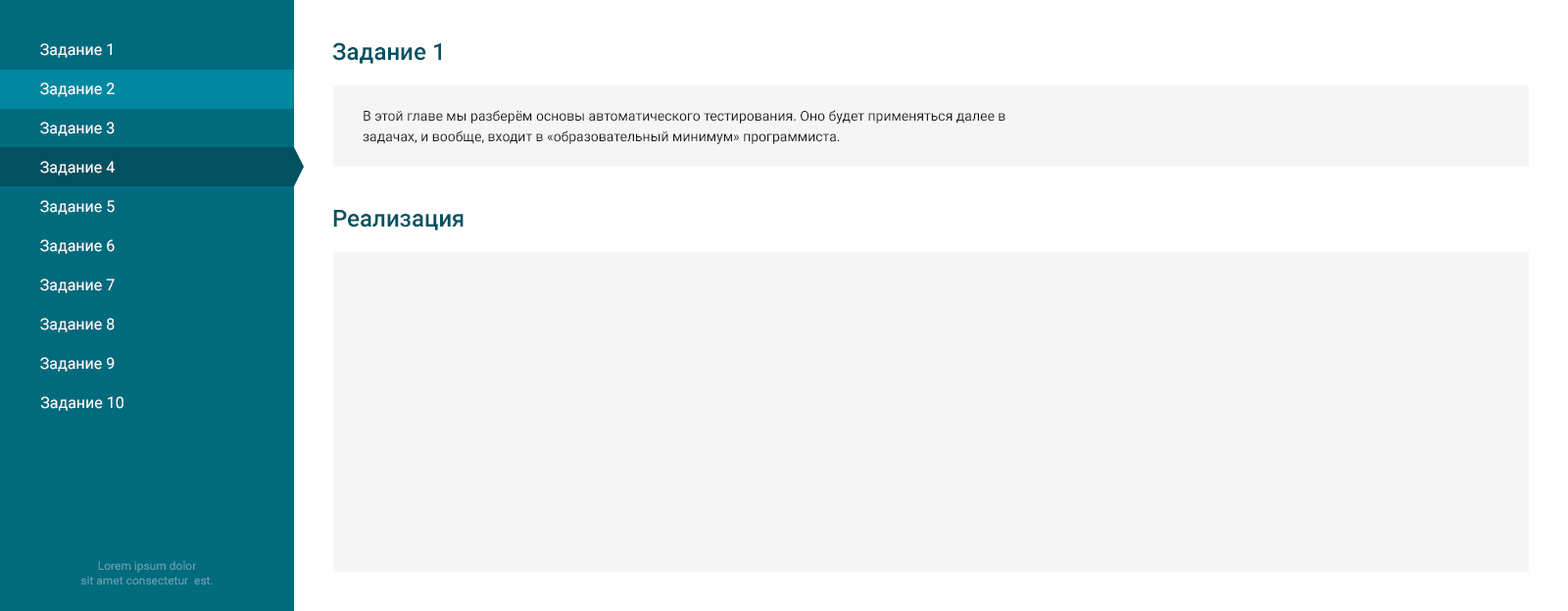
<style>
.page{position:relative;width:1568px;height:611px;background:#f5f5f5}
.page>*{position:absolute;margin:0}
.t1{font:15.7px "Roboto-Regular";color:#ffffff}
.t2{font:23.5px "Roboto-Medium";color:#005261}
.t3{font:13.7px/20.6px "Roboto-Regular";color:#1d1d1d}
.t4{font:11.8px "Roboto-Regular";color:#65a3ae}
</style>
<div class="page">
<p class="t1" style="left:40px;top:43px;width:72px;height:15px">Задание 1</p>
<p class="t2" style="left:332px;top:42px;width:109px;height:22px">Задание 1</p>
<p class="t1" style="left:40px;top:82px;width:75px;height:15px">Задание 2</p>
<p class="t3" style="left:363px;top:110px;width:642px;height:34px">В этой главе мы разберём основы автоматического тестирования. Оно будет применяться далее в задачах, и вообще, входит в «образовательный минимум» программиста.</p>
<p class="t1" style="left:40px;top:122px;width:75px;height:14px">Задание 3</p>
<p class="t1" style="left:40px;top:161px;width:75px;height:14px">Задание 4</p>
<p class="t1" style="left:40px;top:200px;width:75px;height:15px">Задание 5</p>
<p class="t2" style="left:333px;top:210px;width:131px;height:20px">Реализация</p>
<p class="t1" style="left:40px;top:239px;width:75px;height:15px">Задание 6</p>
<p class="t1" style="left:40px;top:278px;width:75px;height:15px">Задание 7</p>
<p class="t1" style="left:40px;top:318px;width:75px;height:14px">Задание 8</p>
<p class="t1" style="left:40px;top:357px;width:75px;height:14px">Задание 9</p>
<p class="t1" style="left:41px;top:396px;width:82px;height:15px">Задание 10</p>
<p class="t4" style="left:80px;top:560px;width:133px;height:24px;text-align:center">Lorem ipsum dolor <br>sit amet consectetur  est.</p>
</div>
